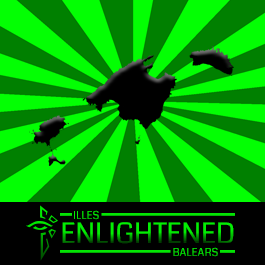
<style>
.page{position:relative;width:265px;height:265px;background:#03ff03}
.page>*{position:absolute;margin:0}
.t1{font:28px "Coda-Regular"}
.t2{font:11.1px "Coda-Regular";color:#03ff03}
.t3{font:11.1px "Coda-Regular";color:#03dc03}
</style>
<div class="page">
<p class="t1" style="left:62px;top:222px;width:172px;height:22px">ENLIGHTENED</p>
<p class="t2" style="left:74px;top:210px;width:25px;height:10px;opacity:0.9">ILLES</p>
<p class="t3" style="left:173px;top:247px;width:45px;height:10px">BALEARS</p>
</div>
